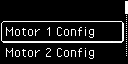
<style>
.page{position:relative;width:128px;height:64px;background:#000000}
.page>*{position:absolute;margin:0}
.t1{font:16px "PixelOperator";color:#ffffff}
</style>
<div class="page">
<p class="t1" style="left:5px;top:27px;width:89px;height:11px">Motor 1 Config</p>
<p class="t1" style="left:5px;top:48px;width:89px;height:11px">Motor 2 Config</p>
</div>
